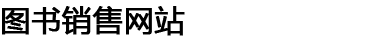
<style>
.page{position:relative;width:384px;height:41px;background:#ffffff}
.page>*{position:absolute;margin:0}
.t1{font:30px "MicrosoftYaHei";color:#000000;font-weight:bold}
</style>
<div class="page">
<p class="t1" style="left:2px;top:6px;width:183px;height:30px">图书销售网站</p>
</div>
